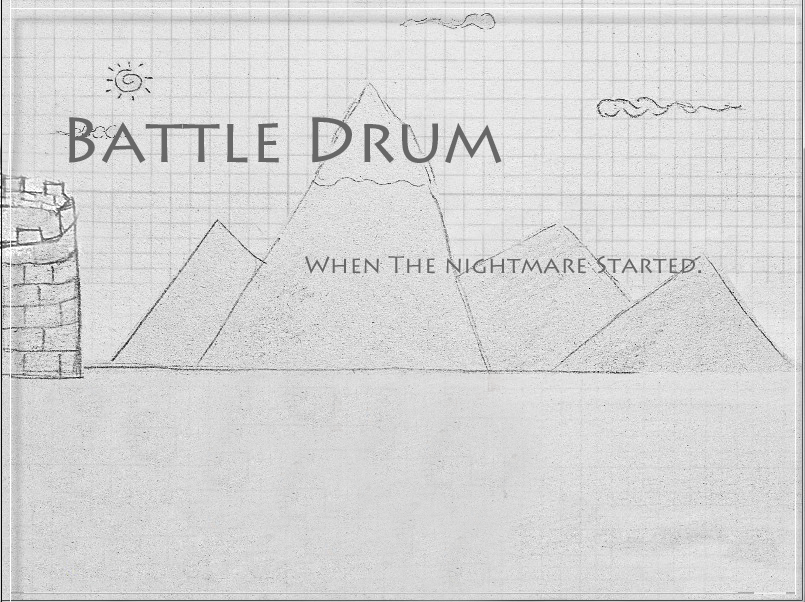
<style>
.page{position:relative;width:805px;height:602px}
.page>*{position:absolute;margin:0}
.t1{font:64px "LithosPro-Regular";color:#676767}
.t2{font:24px "LithosPro-Regular";color:#676767}
</style>
<div class="page">
<p class="t1" style="left:69px;top:117px;width:433px;height:47px">Battle Drum</p>
<p class="t2" style="left:305px;top:255px;width:396px;height:19px">When The nightmare Started.</p>
</div>
